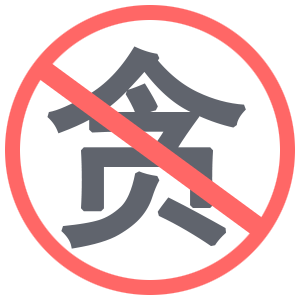
<style>
.page{position:relative;width:300px;height:300px;background:#ffffff}
.page>*{position:absolute;margin:0}
.t1{font:210px "SimHei";color:#60646d;font-weight:bold}
</style>
<div class="page">
<p class="t1" style="left:47px;top:46px;width:199px;height:203px">贪</p>
</div>
